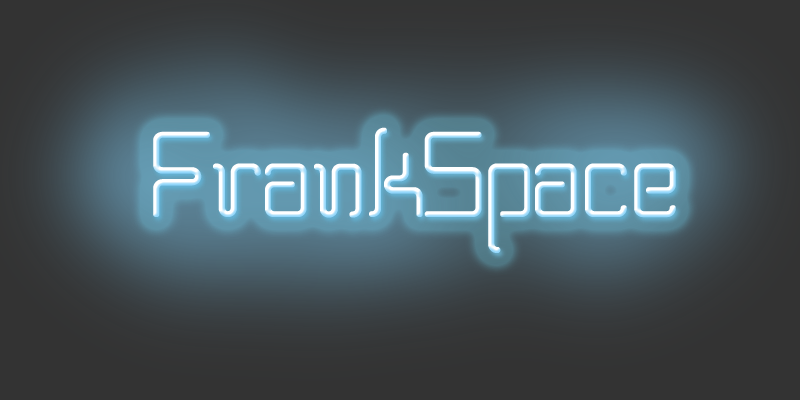
<style>
.page{position:relative;width:800px;height:400px}
.page>*{position:absolute;margin:0}
.t1{font:125px "BPneon"}
</style>
<div class="page">
<p class="t1" style="left:153px;top:127px;width:523px;height:126px">FrankSpace</p>
</div>
